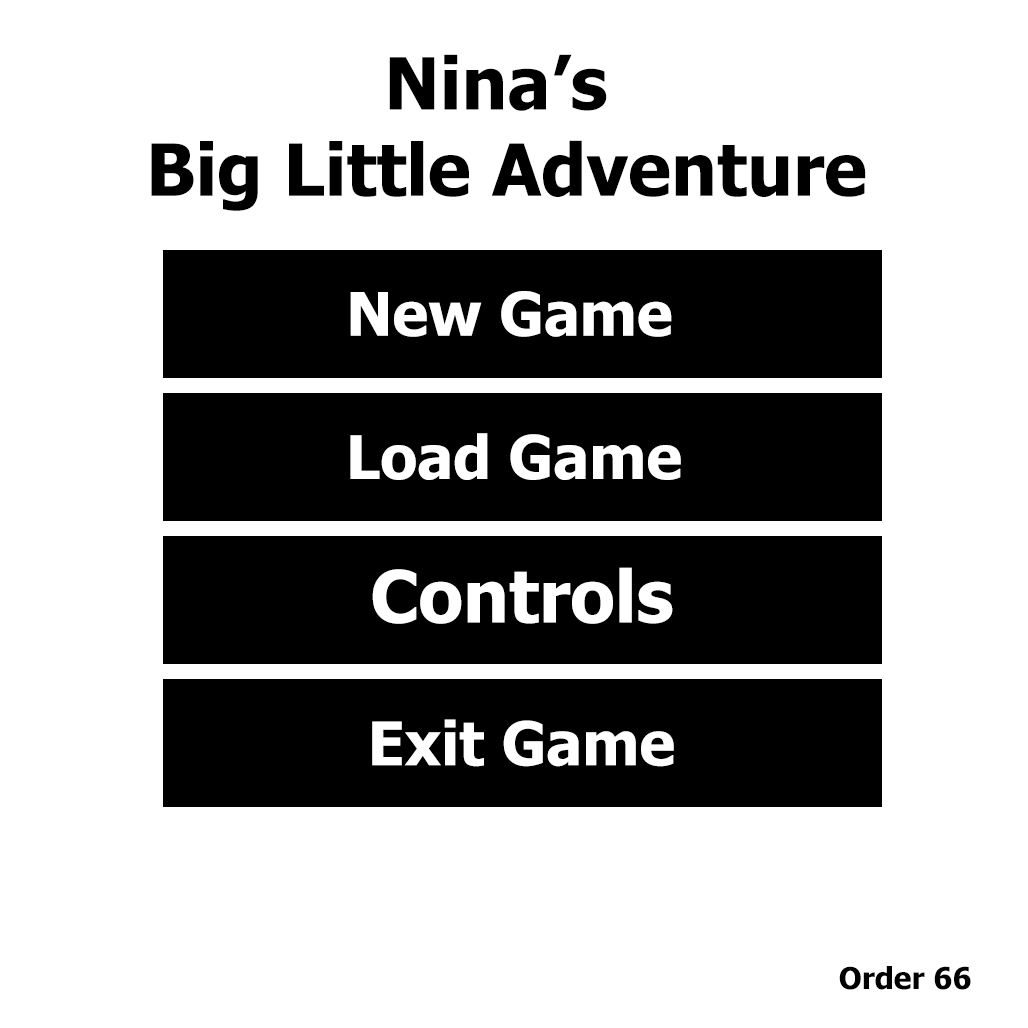
<style>
.page{position:relative;width:1028px;height:1028px;background:#ffffff}
.page>*{position:absolute;margin:0}
.t1{font:72px "Tahoma-Bold";color:#000000}
.t2{font:60px "Tahoma-Bold";color:#ffffff}
.t3{font:72px "Tahoma-Bold";color:#ffffff}
.t4{font:30px "Tahoma-Bold";color:#000000}
</style>
<div class="page">
<p class="t1" style="left:151px;top:54px;width:715px;height:157px;text-align:center">Nina’s <br>Big Little Adventure</p>
<p class="t2" style="left:350px;top:291px;width:322px;height:46px">New Game</p>
<p class="t2" style="left:350px;top:433px;width:331px;height:47px">Load Game</p>
<p class="t3" style="left:372px;top:567px;width:301px;height:57px">Controls</p>
<p class="t2" style="left:372px;top:719px;width:302px;height:48px">Exit Game</p>
<p class="t4" style="left:839px;top:966px;width:132px;height:24px">Order 66</p>
</div>
